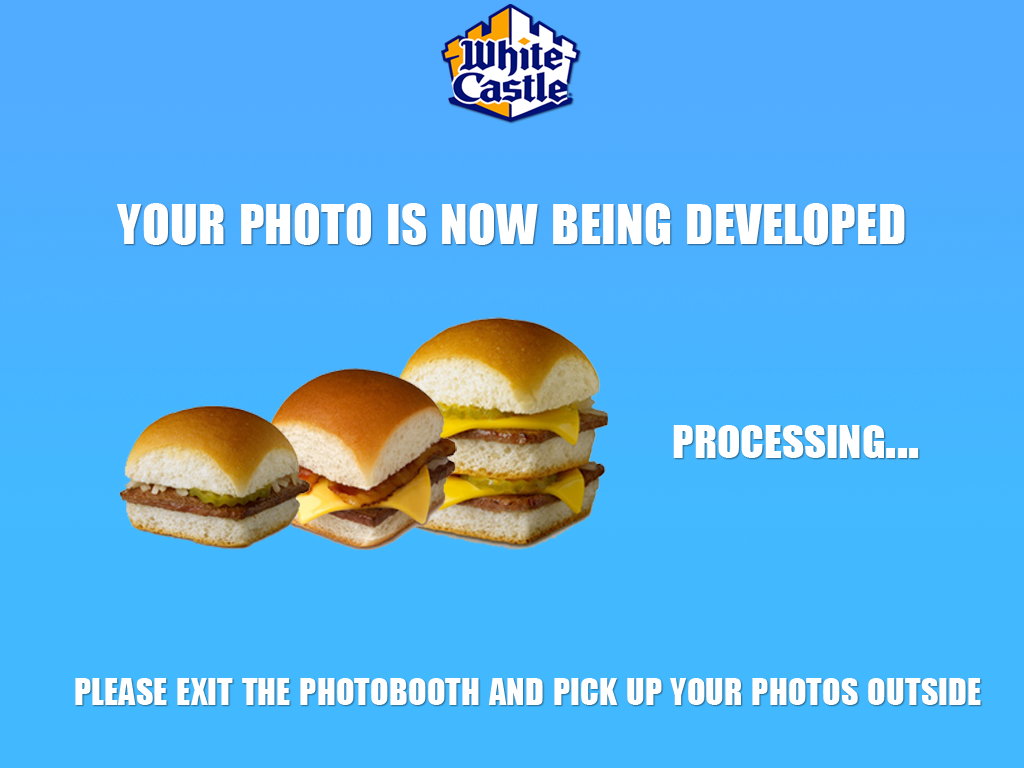
<style>
.page{position:relative;width:1024px;height:768px;background:#42b9ff}
.page>*{position:absolute;margin:0}
.t1{font:72px "Impact";color:#ffffff;font-variant:small-caps}
.t2{font:60px "Impact";color:#ffffff;font-variant:small-caps}
.t3{font:48px "Impact";color:#ffffff;font-variant:small-caps}
</style>
<div class="page">
<p class="t1" style="left:116px;top:203px;width:789px;height:42px">your photo is now being developed</p>
<p class="t2" style="left:673px;top:425px;width:246px;height:33px">processing...</p>
<p class="t3" style="left:75px;top:678px;width:906px;height:27px">please exit the photobooth and pick up your photos outside</p>
</div>
